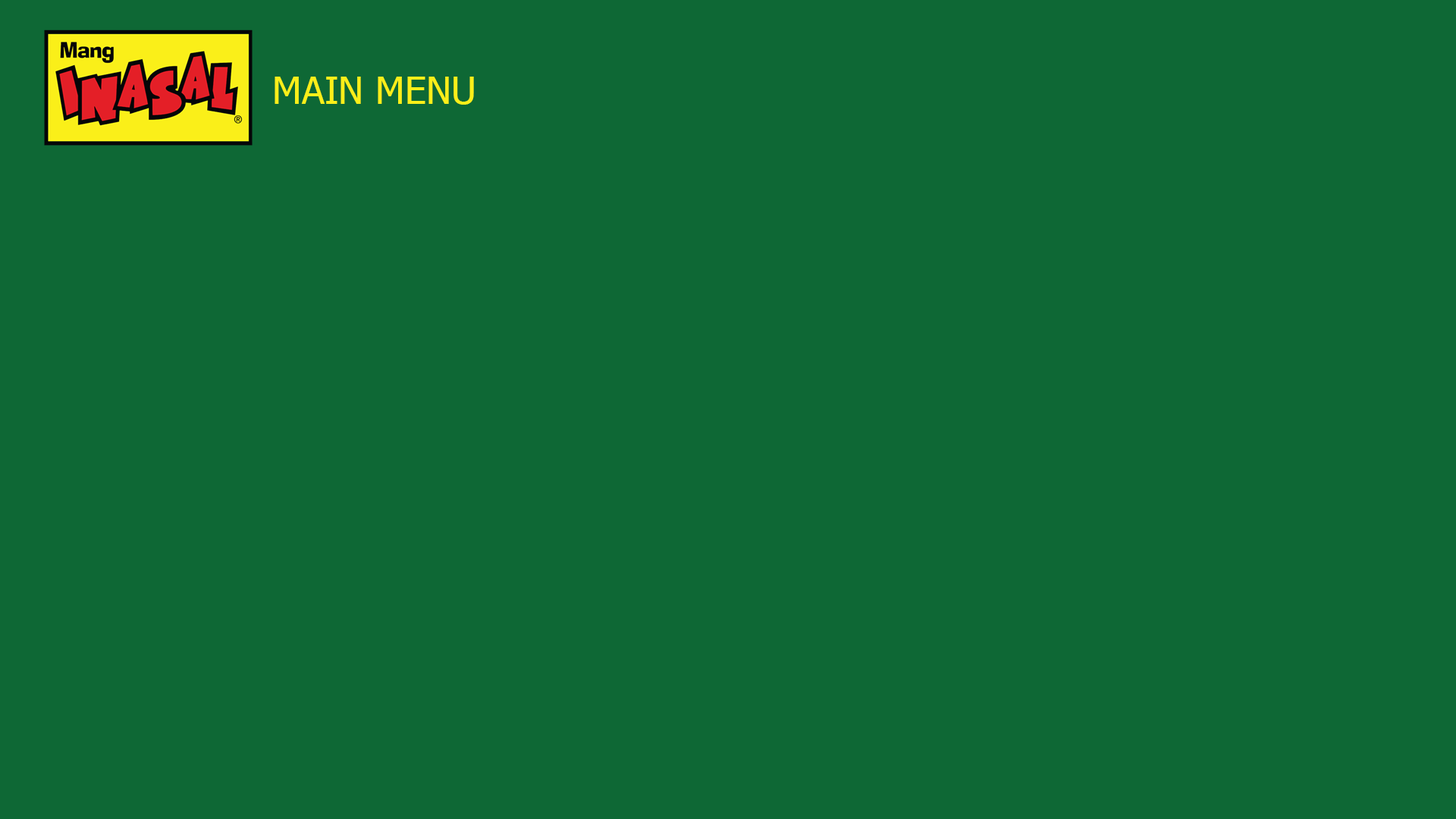
<style>
.page{position:relative;width:1456px;height:819px;background:#0e6835}
.page>*{position:absolute;margin:0}
.t1{font:9.1px "Tahoma";color:#faef19}
</style>
<div class="page">
<p class="t1" style="left:275px;top:77px;width:199px;height:28px">MAIN MENU</p>
</div>
